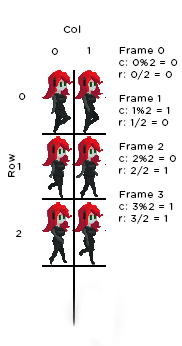
<style>
.page{position:relative;width:182px;height:346px;background:#ffffff}
.page>*{position:absolute;margin:0}
.t1{font:10px "GothamRounded-Book";letter-spacing:0.075em;color:#000000}
.t2{font:10.1px "GothamRounded-Book";letter-spacing:0.075em;color:#000000}
</style>
<div class="page">
<p class="t1" style="left:63px;top:25px;width:18px;height:8px">Col</p>
<p class="t1" style="left:51px;top:48px;width:7px;height:7px">0</p>
<p class="t1" style="left:87px;top:47px;width:3px;height:7px">1</p>
<p class="t1" style="left:119px;top:47px;width:59px;height:177px">Frame 0<br>c: 0%2 = 0<br>r: 0/2 = 0<br><br>Frame 1<br>c: 1%2 = 1<br>r: 1/2 = 0<br><br>Frame 2<br>c: 2%2 = 0<br>r: 2/2 = 1<br><br>Frame 3<br>c: 3%2 = 1<br>r: 3/2 = 1</p>
<p class="t1" style="left:19px;top:93px;width:7px;height:7px">0</p>
<p class="t2" style="left:8px;top:154px;width:7px;height:23px;rotate:-90deg">Row</p>
<p class="t1" style="left:17px;top:163px;width:4px;height:7px">1</p>
<p class="t1" style="left:16px;top:230px;width:6px;height:7px">2</p>
</div>
